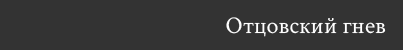
<style>
.page{position:relative;width:403px;height:50px;background:#333333}
.page>*{position:absolute;margin:0}
.t1{font:24px "CrimsonText-Regular";color:#ffffff}
</style>
<div class="page">
<p class="t1" style="left:226px;top:17px;width:160px;height:20px">Отцовский гнев</p>
</div>
